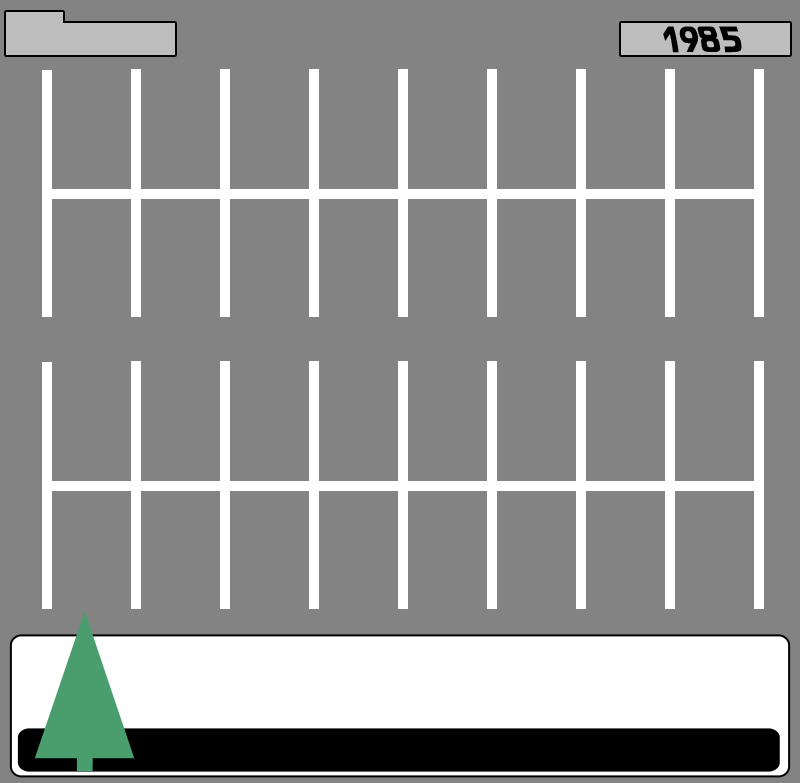
<style>
.page{position:relative;width:800px;height:783px;background:#838383}
.page>*{position:absolute;margin:0}
.t1{font:28.9px "Backtothefuture2002-Regular";color:#000000;scale:0.88 1}
</style>
<div class="page">
<p class="t1" style="left:663px;top:26px;width:79px;height:27px">1985</p>
</div>
